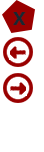
<style>
.page{position:relative;width:44px;height:152px;background:#ffffff}
.page>*{position:absolute;margin:0}
.t1{font:26px "MyriadPro-Semibold";color:#1a2730}
</style>
<div class="page">
<p class="t1" style="left:13px;top:12px;width:13px;height:13px">x</p>
</div>
